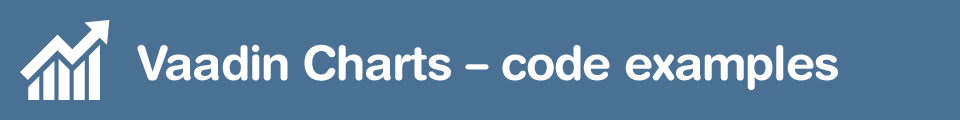
<style>
.page{position:relative;width:960px;height:120px;background:#4a7093}
.page>*{position:absolute;margin:0}
.t1{font:48px "HelveticaRoundedLTStd-Bd";letter-spacing:-0.025em;color:#ffffff}
</style>
<div class="page">
<p class="t1" style="left:137px;top:44px;width:701px;height:46px">Vaadin Charts – code examples</p>
</div>
